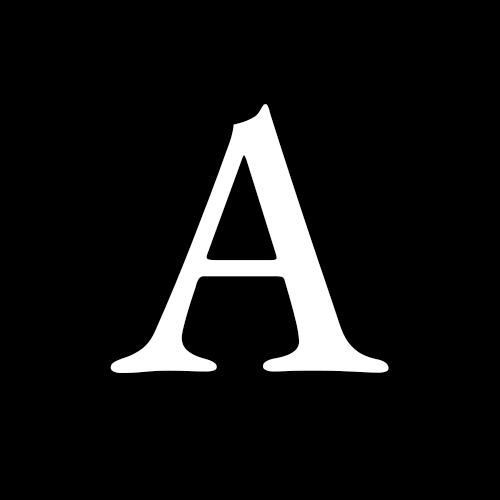
<style>
.page{position:relative;width:500px;height:500px;background:#000000}
.page>*{position:absolute;margin:0}
.t1{font:390.4px "EBGaramond-Medium";letter-spacing:-0.025em;color:#ffffff}
</style>
<div class="page">
<p class="t1" style="left:110px;top:104px;width:279px;height:269px">A</p>
</div>
